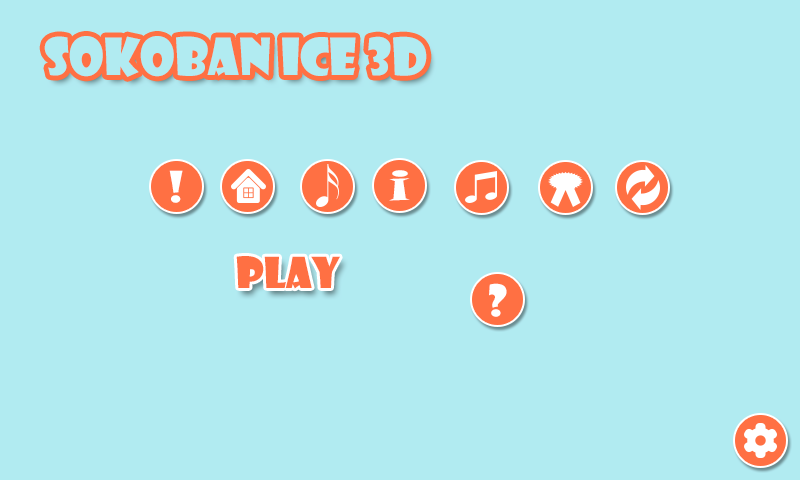
<style>
.page{position:relative;width:800px;height:480px;background:#b1ebf1}
.page>*{position:absolute;margin:0}
.t1{font:50px "ShowcardGothic-Reg";color:#b2ebf2}
.t2{font:41.7px "ShowcardGothic-Reg";color:#ffffff}
.t3{font:41.7px "SnapITC-Regular";color:#ffffff}
.t4{font:41.7px "ShowcardGothic-Reg";color:#ff7043}
</style>
<div class="page">
<p class="t1" style="left:44px;top:36px;width:383px;height:41px">SOKOBAN ICE 3d</p>
<p class="t2" style="left:169px;top:170px;width:14px;height:33px">!</p>
<p class="t3" style="left:389px;top:170px;width:21px;height:31px">i</p>
<p class="t4" style="left:236px;top:256px;width:104px;height:33px">PLAY</p>
<p class="t2" style="left:489px;top:283px;width:18px;height:34px">?</p>
</div>
